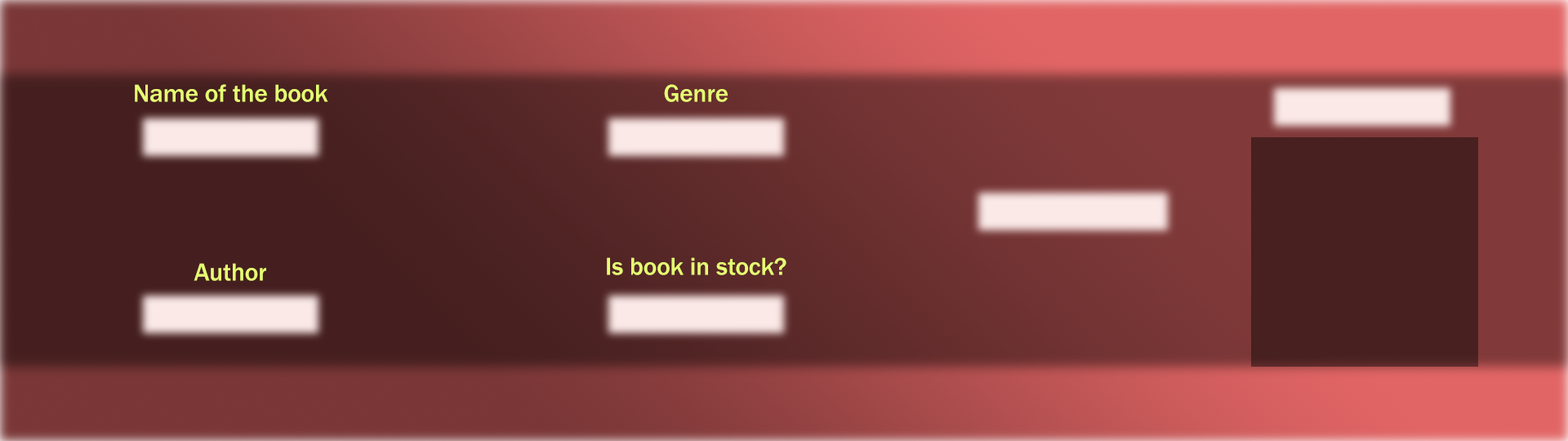
<style>
.page{position:relative;width:1568px;height:441px}
.page>*{position:absolute;margin:0}
.t1{font:25.3px "FranklinGothic-Medium";color:#e6ff73}
</style>
<div class="page">
<p class="t1" style="left:135px;top:84px;width:193px;height:18px">Name of the book</p>
<p class="t1" style="left:664px;top:84px;width:64px;height:18px">Genre</p>
<p class="t1" style="left:607px;top:257px;width:179px;height:18px">Is book in stock?</p>
<p class="t1" style="left:194px;top:263px;width:72px;height:18px">Author</p>
</div>
